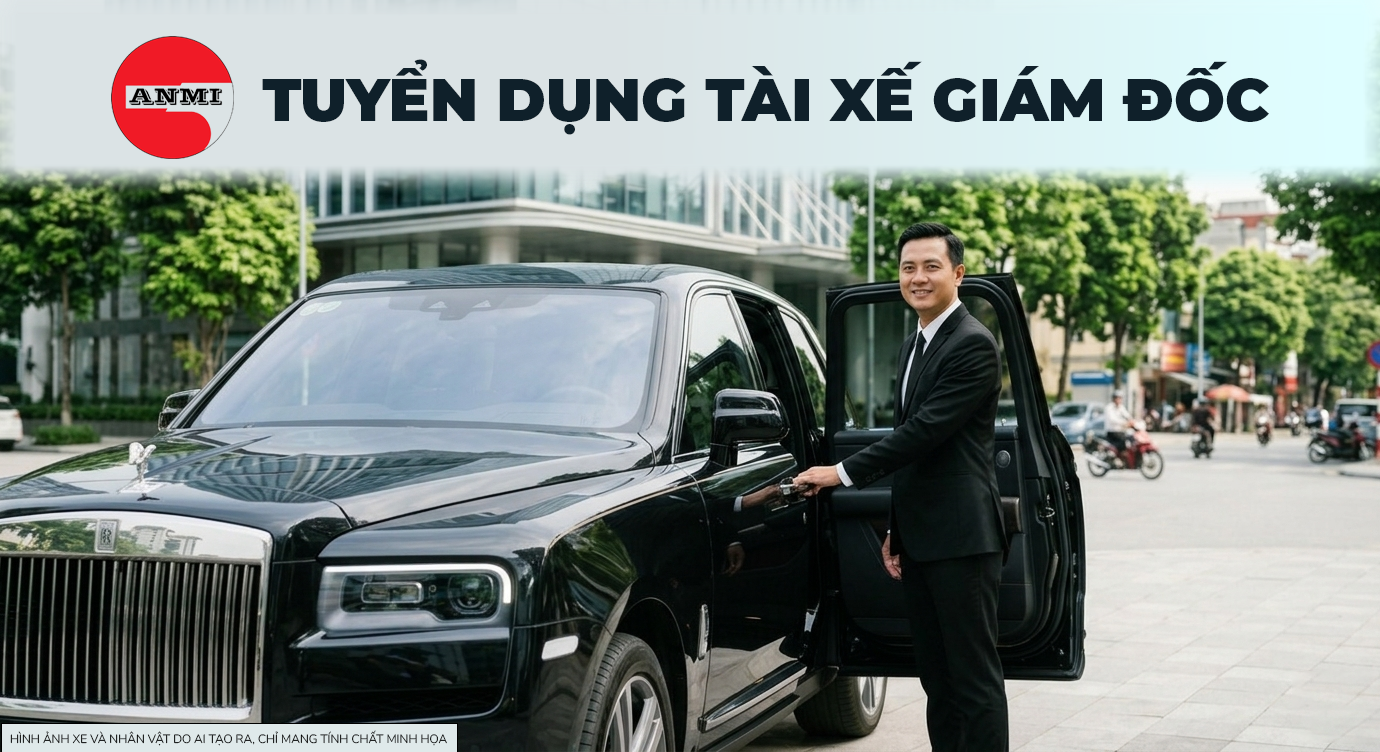
<style>
.page{position:relative;width:1380px;height:752px}
.page>*{position:absolute;margin:0}
.t1{font:60px "Montserrat-Black";color:#0f202a;text-transform:uppercase}
.t2{font:12px "Nunito-Light";color:#000000;text-transform:uppercase}
</style>
<div class="page">
<p class="t1" style="left:262px;top:59px;width:1007px;height:76px">Tuyển dụng Tài Xế Giám Đốc</p>
<p class="t2" style="left:10px;top:730px;width:437px;height:16px">hình ảnh xe và nhân vật do ai tạo ra, chỉ mang tính chất minh họa</p>
</div>
